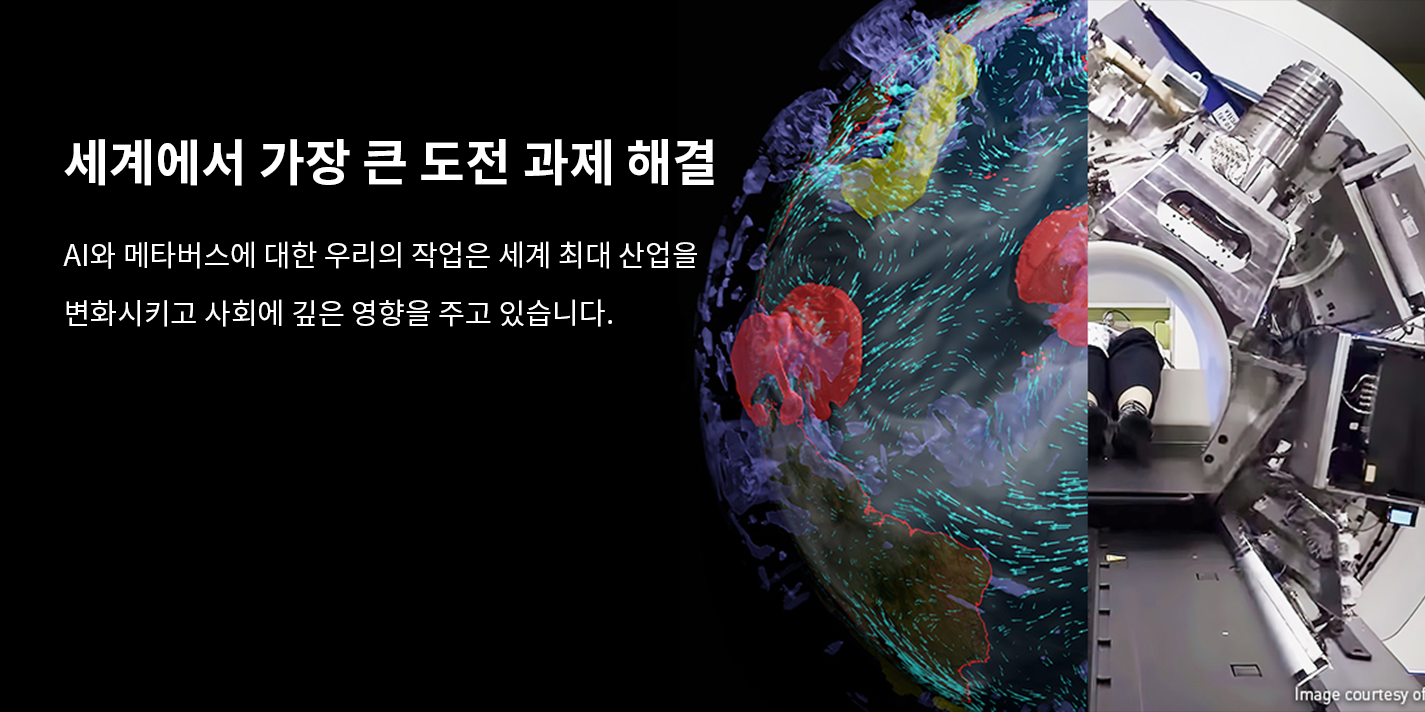
<style>
.page{position:relative;width:1425px;height:712px;background:#000000}
.page>*{position:absolute;margin:0}
.t1{font:50px "NotoSansKR-Bold";color:#ffffff}
.t2{font:29.2px/58.3px "NotoSansKR-Regular";color:#ffffff}
</style>
<div class="page">
<p class="t1" style="left:64px;top:139px;width:650px;height:47px">세계에서 가장 큰 도전 과제 해결</p>
<p class="t2" style="left:63px;top:241px;width:634px;height:86px">AI와 메타버스에 대한 우리의 작업은 세계 최대 산업을<br>변화시키고 사회에 깊은 영향을 주고 있습니다.</p>
</div>
